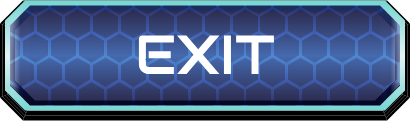
<style>
.page{position:relative;width:410px;height:121px}
.page>*{position:absolute;margin:0}
.t1{font:55px "Audiowide-Regular";color:#ffffff}
</style>
<div class="page">
<p class="t1" style="left:138px;top:35px;width:136px;height:39px">EXIT</p>
</div>
